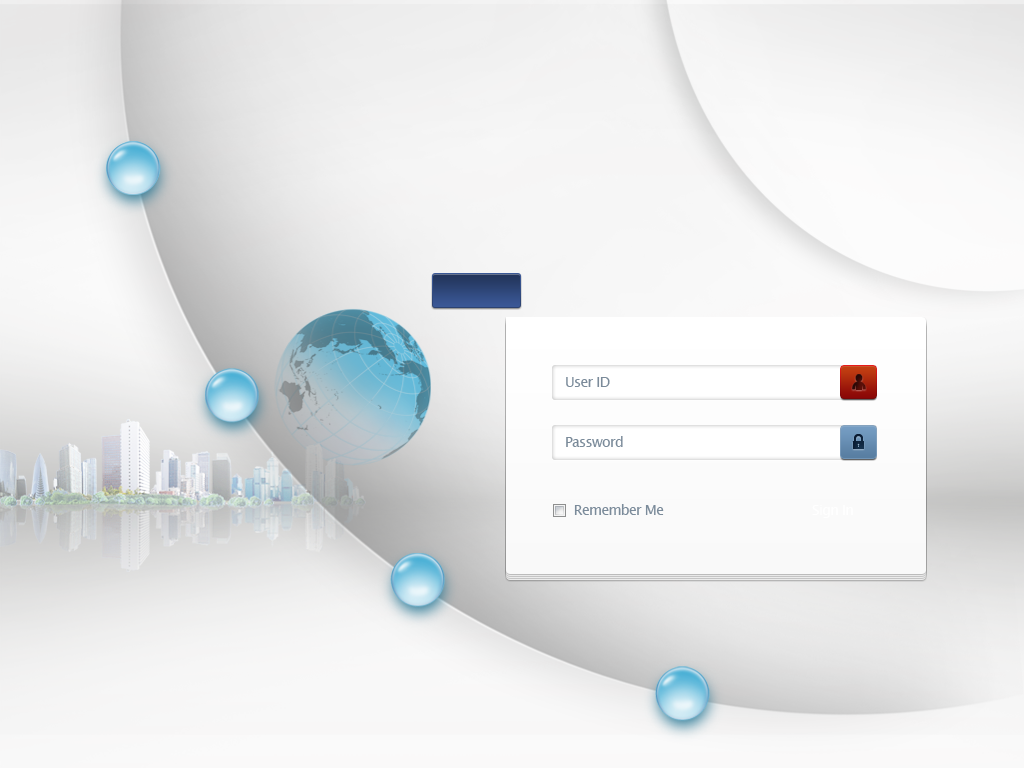
<style>
.page{position:relative;width:1024px;height:768px}
.page>*{position:absolute;margin:0}
.t1{font:14px "LucidaSansUnicode";letter-spacing:-0.05em;color:#7b8b9a}
</style>
<div class="page">
<p class="t1" style="left:566px;top:377px;width:44px;height:10px">User ID</p>
<p class="t1" style="left:566px;top:436px;width:57px;height:11px">Password</p>
<p class="t1" style="left:574px;top:504px;width:90px;height:11px">Remember Me</p>
</div>
